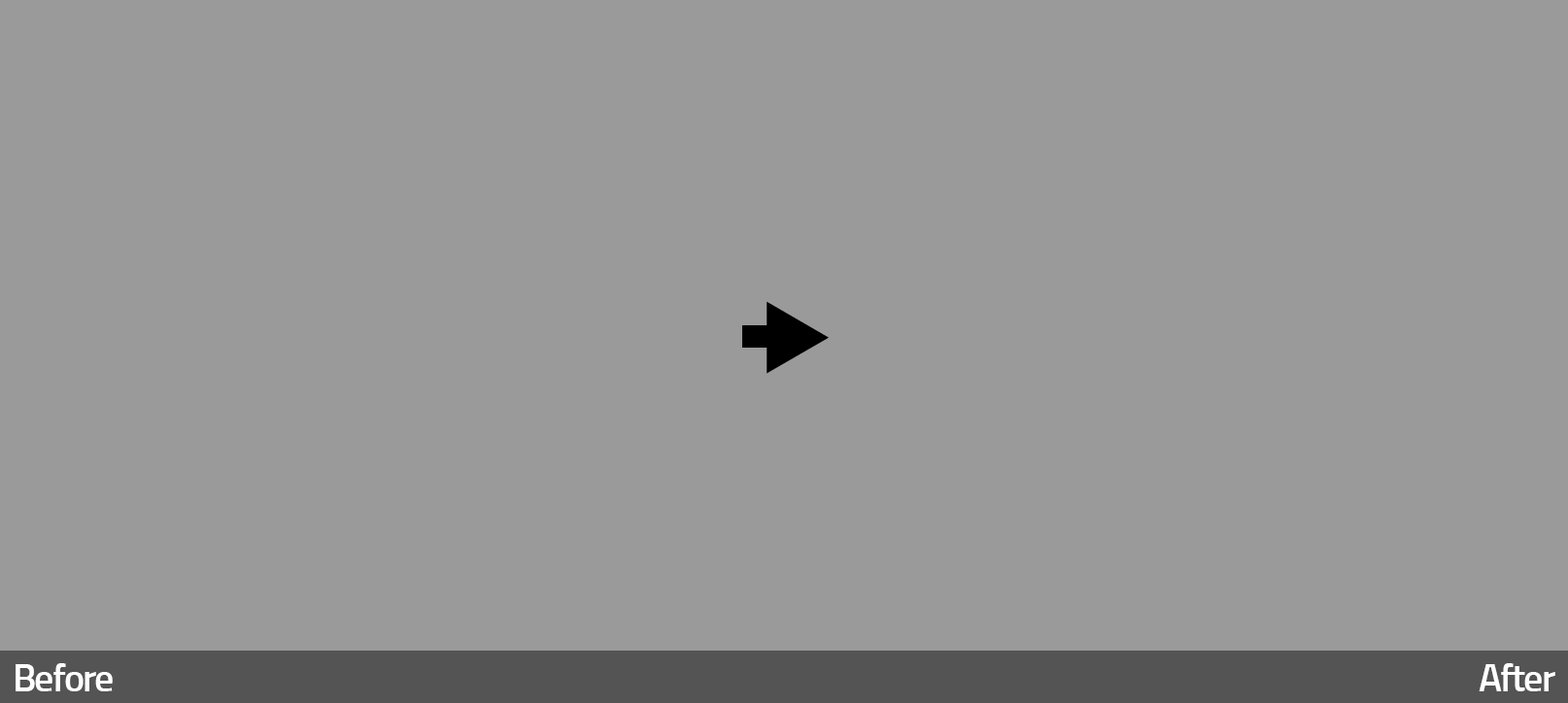
<style>
.page{position:relative;width:1568px;height:703px;background:#9a9a9a}
.page>*{position:absolute;margin:0}
.t1{font:38.9px "Titillium-Semibold";letter-spacing:-0.05em;color:#ffffff}
</style>
<div class="page">
<p class="t1" style="left:16px;top:664px;width:97px;height:28px">Before</p>
<p class="t1" style="left:1479px;top:664px;width:76px;height:28px">After</p>
</div>
